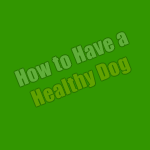
<style>
.page{position:relative;width:150px;height:150px;background:#329600}
.page>*{position:absolute;margin:0}
.t1{font:20.3px "Impact";letter-spacing:0.02em}
</style>
<div class="page">
<p class="t1" style="left:14px;top:32px;width:117px;height:75px;text-align:center;rotate:-22deg">How to Have a <br>Healthy Dog</p>
</div>
